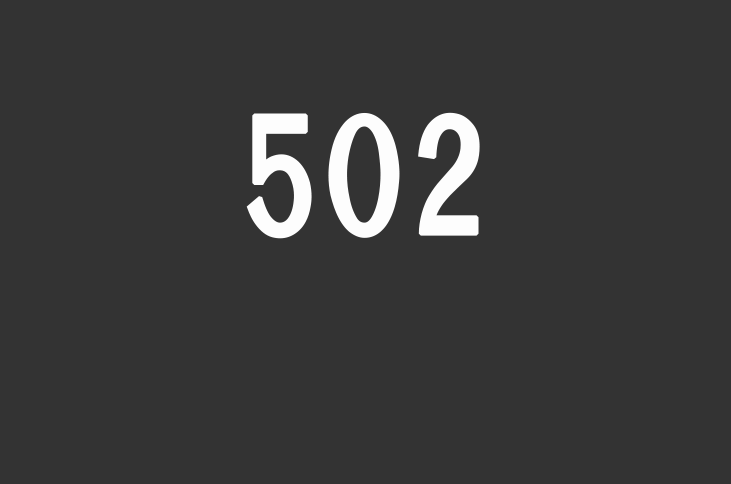
<style>
.page{position:relative;width:731px;height:484px;background:#333333}
.page>*{position:absolute;margin:0}
.t1{font:144px "HGSSoeiPresenceEB";color:#fdfdfd;font-weight:bold}
</style>
<div class="page">
<p class="t1" style="left:246px;top:112px;width:234px;height:127px">502</p>
</div>
